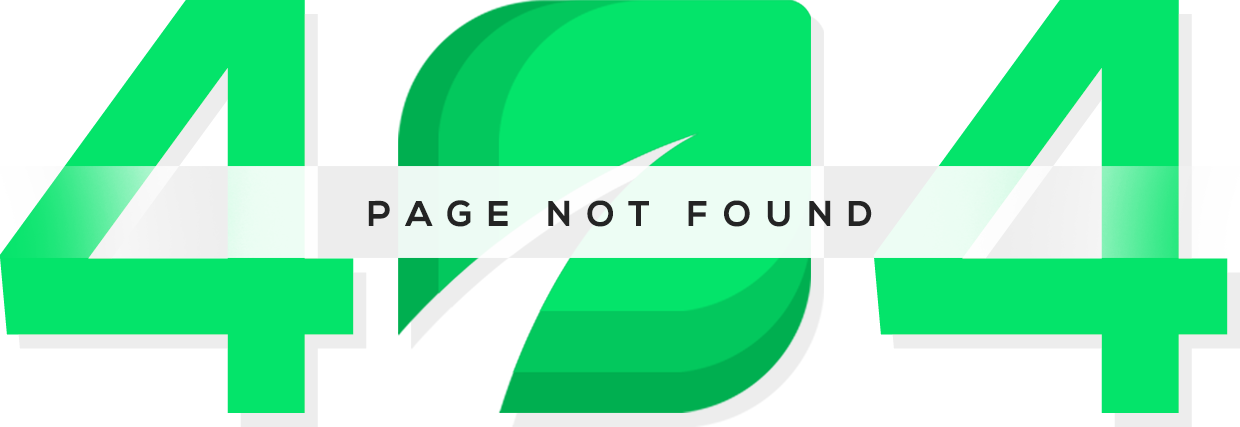
<style>
.page{position:relative;width:1240px;height:427px;background:#04e46a}
.page>*{position:absolute;margin:0}
.t1{font:590.6px "NexaBold";color:#04e46a;text-transform:uppercase}
.t2{font:35.4px "NexaBold";letter-spacing:0.42em;color:#242424;text-transform:uppercase}
</style>
<div class="page">
<p class="t1" style="left:0px;top:0px;width:354px;height:413px">4</p>
<p class="t1" style="left:873px;top:0px;width:355px;height:413px">4</p>
<p class="t1" style="left:12px;top:14px;width:355px;height:413px">4</p>
<p class="t1" style="left:886px;top:14px;width:355px;height:413px">4</p>
<p class="t2" style="left:368px;top:200px;width:504px;height:27px">page not found</p>
</div>
